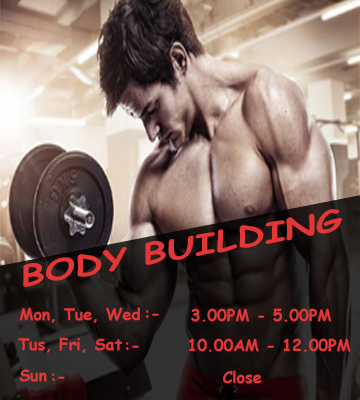
<style>
.page{position:relative;width:360px;height:400px}
.page>*{position:absolute;margin:0}
.t1{font:28.7px "ComicSansMS-Bold";color:#e33637;scale:1.35 1}
.t2{font:15.9px "ComicSansMS-Bold";color:#e33637}
</style>
<div class="page">
<p class="t1" style="left:23px;top:209px;width:319px;height:78px;rotate:-10deg">BODY BUILDING</p>
<p class="t2" style="left:20px;top:307px;width:120px;height:16px">Mon, Tue, Wed</p>
<p class="t2" style="left:146px;top:310px;width:13px;height:8px">-:</p>
<p class="t2" style="left:191px;top:308px;width:140px;height:14px">3.00PM - 5.00PM</p>
<p class="t2" style="left:18px;top:337px;width:104px;height:16px">Tus, Fri, Sat</p>
<p class="t2" style="left:126px;top:342px;width:13px;height:8px">-:</p>
<p class="t2" style="left:189px;top:338px;width:162px;height:14px">10.00AM - 12.00PM</p>
<p class="t2" style="left:19px;top:369px;width:28px;height:13px">Sun</p>
<p class="t2" style="left:52px;top:373px;width:13px;height:8px">-:</p>
<p class="t2" style="left:223px;top:370px;width:39px;height:14px">Close</p>
</div>
